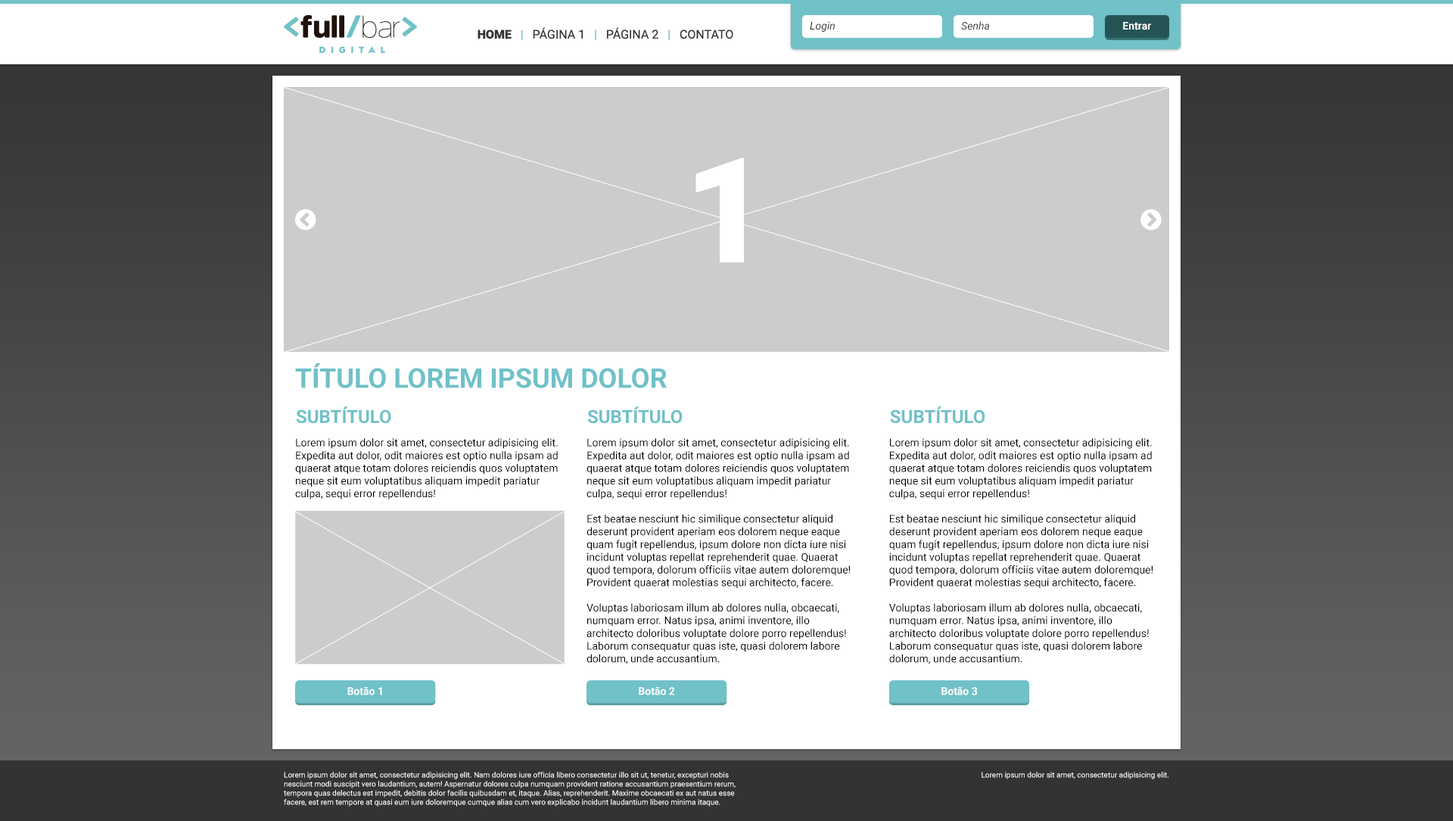
<style>
.page{position:relative;width:1453px;height:821px;background:#ffffff}
.page>*{position:absolute;margin:0}
.t1{font:12.1px "Roboto-Regular";color:#333333;text-transform:uppercase}
.t2{font:12.1px "Roboto-Black";color:#333333;text-transform:uppercase}
.t3{font:12.1px "Roboto-Regular";color:#70c1c8;text-transform:uppercase}
.t4{font:10.6px "Roboto-Italic";color:#333333}
.t5{font:10.6px "Roboto-Bold";color:#ffffff}
.t6{font:146.6px "Roboto-Black";color:#ffffff}
.t7{font:27.2px "Roboto-Bold";color:#70c1c8;text-transform:uppercase}
.t8{font:18.1px "Roboto-Bold";color:#70c1c8;text-transform:uppercase}
.t9{font:10.6px "Roboto-Regular";color:#010101}
.t10{font:7.6px "Roboto-Regular";color:#ffffff}
</style>
<div class="page">
<p class="t1" style="left:477px;top:27px;width:256px;height:14px"><span class="t2">Home   </span><span class="t3">|</span>   Página 1   <span class="t3">|</span>   Página 2   <span class="t3">|</span>   Contato</p>
<p class="t4" style="left:810px;top:21px;width:25px;height:11px">Login</p>
<p class="t4" style="left:961px;top:21px;width:28px;height:9px">Senha</p>
<p class="t5" style="left:1123px;top:22px;width:29px;height:8px">Entrar</p>
<p class="t6" style="left:695px;top:157px;width:49px;height:106px">1</p>
<p class="t7" style="left:295px;top:363px;width:372px;height:25px">TÍTULO LOREM IPSUM DOLOR</p>
<p class="t8" style="left:296px;top:406px;width:95px;height:18px">SUBTÍTULO</p>
<p class="t8" style="left:587px;top:406px;width:95px;height:18px">SUBTÍTULO</p>
<p class="t8" style="left:890px;top:406px;width:95px;height:18px">SUBTÍTULO</p>
<p class="t9" style="left:295px;top:438px;width:263px;height:61px">Lorem ipsum dolor sit amet, consectetur adipisicing elit. Expedita aut dolor, odit maiores est optio nulla ipsam ad quaerat atque totam dolores reiciendis quos voluptatem neque sit eum voluptatibus aliquam impedit pariatur culpa, sequi error repellendus!</p>
<p class="t9" style="left:586px;top:438px;width:264px;height:226px">Lorem ipsum dolor sit amet, consectetur adipisicing elit. Expedita aut dolor, odit maiores est optio nulla ipsam ad quaerat atque totam dolores reiciendis quos voluptatem neque sit eum voluptatibus aliquam impedit pariatur culpa, sequi error repellendus!<br><br>Est beatae nesciunt hic similique consectetur aliquid deserunt provident aperiam eos dolorem neque eaque quam fugit repellendus, ipsum dolore non dicta iure nisi incidunt voluptas repellat reprehenderit quae. Quaerat quod tempora, dolorum officiis vitae autem doloremque!<br>Provident quaerat molestias sequi architecto, facere.<br><br>Voluptas laboriosam illum ab dolores nulla, obcaecati, numquam error. Natus ipsa, animi inventore, illo architecto doloribus voluptate dolore porro repellendus! Laborum consequatur quas iste, quasi dolorem labore dolorum, unde accusantium.</p>
<p class="t9" style="left:889px;top:438px;width:263px;height:226px">Lorem ipsum dolor sit amet, consectetur adipisicing elit. Expedita aut dolor, odit maiores est optio nulla ipsam ad quaerat atque totam dolores reiciendis quos voluptatem neque sit eum voluptatibus aliquam impedit pariatur culpa, sequi error repellendus!<br><br>Est beatae nesciunt hic similique consectetur aliquid deserunt provident aperiam eos dolorem neque eaque quam fugit repellendus, ipsum dolore non dicta iure nisi incidunt voluptas repellat reprehenderit quae. Quaerat quod tempora, dolorum officiis vitae autem doloremque!<br>Provident quaerat molestias sequi architecto, facere.<br><br>Voluptas laboriosam illum ab dolores nulla, obcaecati, numquam error. Natus ipsa, animi inventore, illo architecto doloribus voluptate dolore porro repellendus! Laborum consequatur quas iste, quasi dolorem labore dolorum, unde accusantium.</p>
<p class="t5" style="left:347px;top:687px;width:35px;height:8px">Botão 1</p>
<p class="t5" style="left:639px;top:687px;width:36px;height:8px">Botão 2</p>
<p class="t5" style="left:941px;top:687px;width:36px;height:8px">Botão 3</p>
<p class="t10" style="left:284px;top:772px;width:451px;height:35px">Lorem ipsum dolor sit amet, consectetur adipisicing elit. Nam dolores iure officia libero consectetur illo sit ut, tenetur, excepturi nobis nesciunt modi suscipit vero laudantium, autem! Aspernatur dolores culpa numquam provident ratione accusantium praesentium rerum, tempora quas delectus est impedit, debitis dolor facilis quibusdam et, itaque. Alias, reprehenderit. Maxime obcaecati ex aut natus esse facere, est rem tempore at quasi eum iure doloremque cumque alias cum vero explicabo incidunt laudantium libero minima itaque.</p>
<p class="t10" style="left:981px;top:772px;width:187px;height:7px">Lorem ipsum dolor sit amet, consectetur adipisicing elit.</p>
</div>
